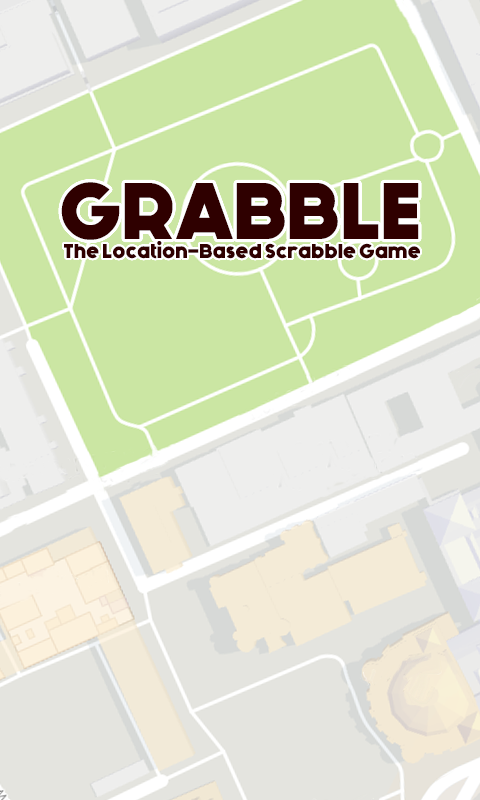
<style>
.page{position:relative;width:480px;height:800px;background:#cbe6a3}
.page>*{position:absolute;margin:0}
.t1{font:80px "Generica-Bold";color:#2f0000}
.t2{font:20px "Generica-Bold";color:#2f0000}
</style>
<div class="page">
<p class="t1" style="left:61px;top:182px;width:358px;height:58px">GRABBLE</p>
<p class="t2" style="left:64px;top:241px;width:356px;height:18px">The Location-Based Scrabble Game</p>
</div>
